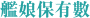
<style>
.page{position:relative;width:90px;height:18px;background:#ffffff}
.page>*{position:absolute;margin:0}
.t1{font:18px "RyuminPr6N-ExBold";color:#26a2a2}
</style>
<div class="page">
<p class="t1" style="left:0px;top:0px;width:90px;height:18px">艦娘保有數</p>
</div>
